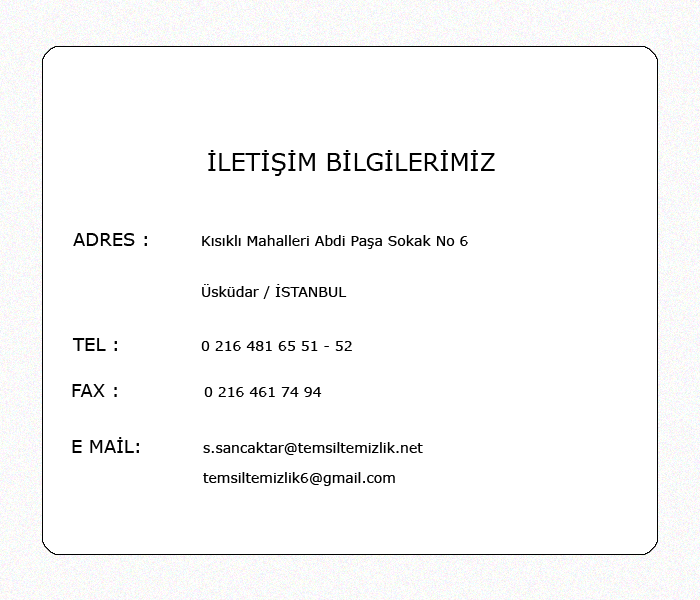
<style>
.page{position:relative;width:700px;height:600px;background:#ffffff}
.page>*{position:absolute;margin:0}
.t1{font:24px "Verdana";color:#000000}
.t2{font:18px "Verdana";color:#000000}
.t3{font:14px "Verdana";color:#000000}
</style>
<div class="page">
<p class="t1" style="left:208px;top:150px;width:287px;height:26px">İLETİŞİM BİLGİLERİMİZ</p>
<p class="t2" style="left:73px;top:233px;width:74px;height:13px">ADRES :</p>
<p class="t3" style="left:202px;top:235px;width:266px;height:14px">Kısıklı Mahalleri Abdi Paşa Sokak No 6</p>
<p class="t3" style="left:202px;top:284px;width:145px;height:15px">Üsküdar / İSTANBUL</p>
<p class="t2" style="left:72px;top:338px;width:45px;height:13px">TEL :</p>
<p class="t3" style="left:201px;top:341px;width:151px;height:10px">0 216 481 65 51 - 52</p>
<p class="t2" style="left:72px;top:384px;width:45px;height:13px">FAX :</p>
<p class="t3" style="left:204px;top:387px;width:118px;height:10px">0 216 461 74 94</p>
<p class="t2" style="left:72px;top:437px;width:67px;height:16px">E MAİL:</p>
<p class="t3" style="left:203px;top:442px;width:220px;height:13px">s.sancaktar@temsiltemizlik.net</p>
<p class="t3" style="left:203px;top:472px;width:192px;height:14px">temsiltemizlik6@gmail.com</p>
</div>
